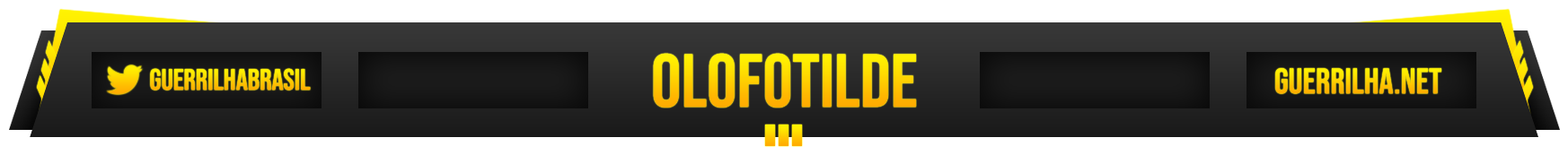
<style>
.page{position:relative;width:1568px;height:155px;background:#ffffff}
.page>*{position:absolute;margin:0}
.t1{font:75.3px "BebasNeue-Regular"}
.t2{font:29.6px "BebasNeue-Regular"}
.t3{font:35.9px "BebasNeue-Regular"}
</style>
<div class="page">
<p class="t1" style="left:653px;top:53px;width:263px;height:55px">olofotilde</p>
<p class="t2" style="left:150px;top:68px;width:161px;height:23px">guerrilhabrasil</p>
<p class="t3" style="left:1275px;top:68px;width:166px;height:26px">guerrilha.net</p>
</div>
